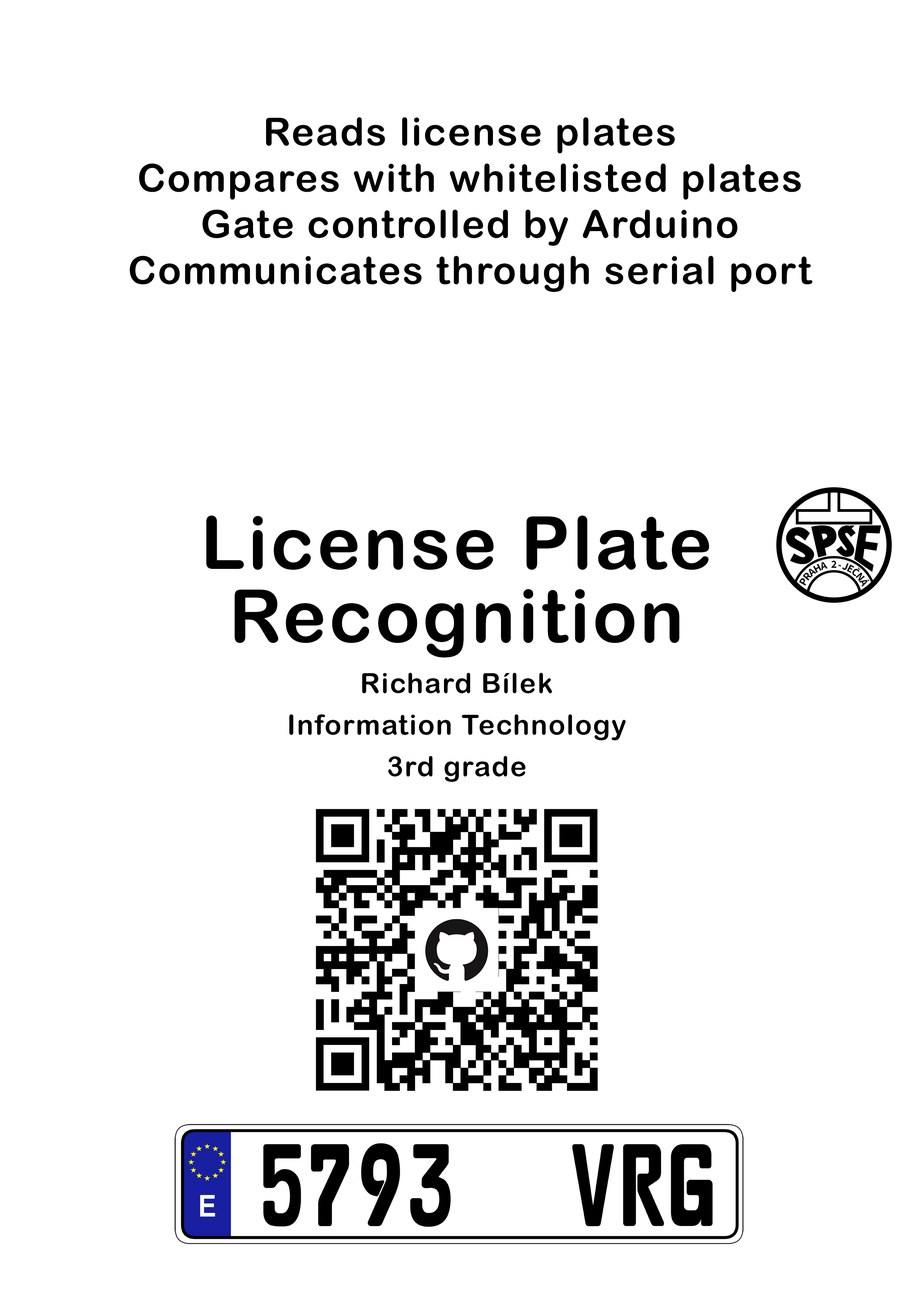
<style>
.page{position:relative;width:918px;height:1298px;background:#ffffff}
.page>*{position:absolute;margin:0}
.t1{font:38.5px/46.2px "ArialRoundedMTBold";letter-spacing:0.04em;color:#000000}
.t2{font:73.2px/73.2px "ArialRoundedMTBold";letter-spacing:0.04em;color:#000000}
.t3{font:27.7px "ArialRoundedMTBold";letter-spacing:0.04em;color:#000000}
</style>
<div class="page">
<p class="t1" style="left:130px;top:117px;width:683px;height:175px;text-align:center">Reads license plates<br>Compares with whitelisted plates<br>Gate controlled by Arduino<br>Communicates through serial port</p>
<p class="t2" style="left:206px;top:515px;width:504px;height:143px;text-align:center">License Plate<br>Recognition</p>
<p class="t3" style="left:362px;top:673px;width:190px;height:20px">Richard Bílek</p>
<p class="t3" style="left:289px;top:714px;width:337px;height:26px">Information Technology</p>
<p class="t3" style="left:388px;top:756px;width:138px;height:26px">3rd grade</p>
</div>
